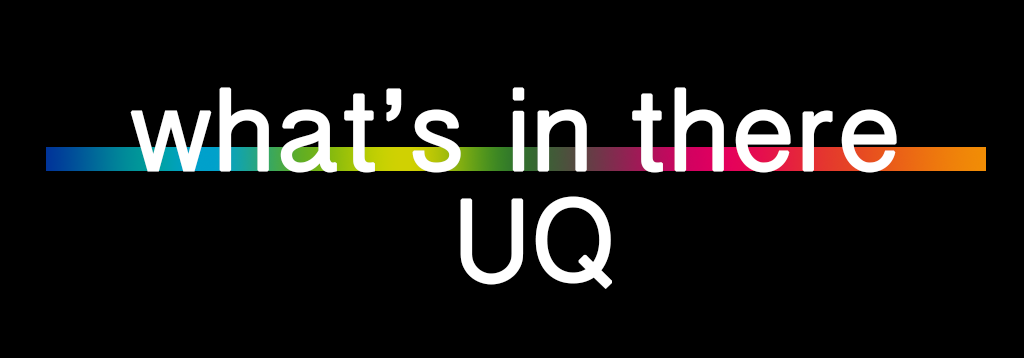
<style>
.page{position:relative;width:1024px;height:358px;background:#000000}
.page>*{position:absolute;margin:0}
.t1{font:102px "BanglaSangamMN";color:#ffffff;font-weight:bold}
</style>
<div class="page">
<p class="t1" style="left:130px;top:87px;width:767px;height:86px">what’s in there</p>
<p class="t1" style="left:460px;top:196px;width:152px;height:93px">UQ</p>
</div>
